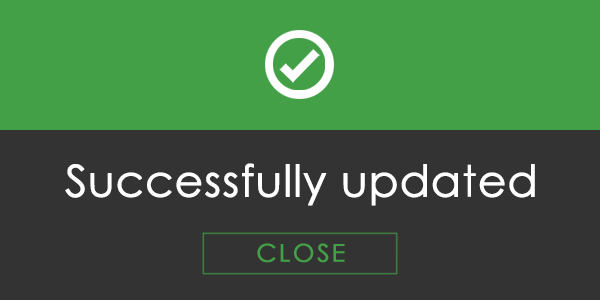
<style>
.page{position:relative;width:600px;height:300px;background:#333333}
.page>*{position:absolute;margin:0}
.t1{font:43.8px "CenturyGothic";color:#ffffff;font-weight:bold}
.t2{font:24.6px "CenturyGothic";letter-spacing:0.08em;color:#43a047;font-weight:bold}
</style>
<div class="page">
<p class="t1" style="left:65px;top:163px;width:470px;height:43px">Successfully updated</p>
<p class="t2" style="left:257px;top:243px;width:88px;height:20px">CLOSE</p>
</div>
